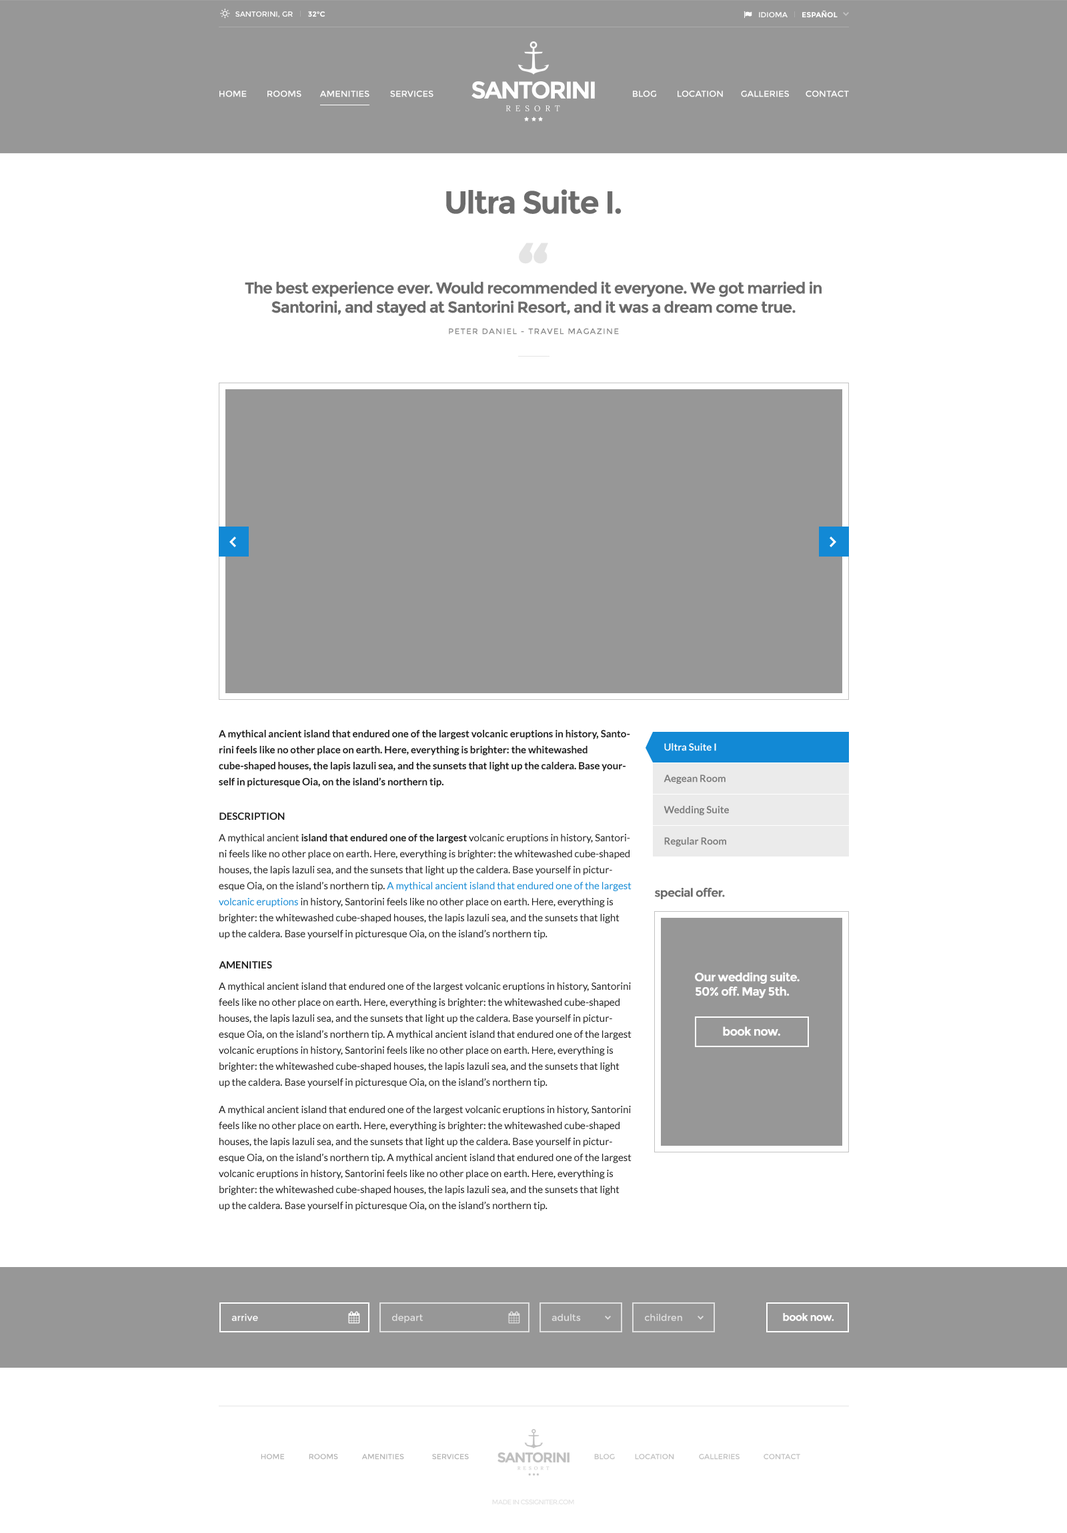
<style>
.page{position:relative;width:1067px;height:1533px;background:#ffffff}
.page>*{position:absolute;margin:0}
.t1{font:7.3px "Montserrat-Regular";color:#fefefe}
.t2{font:7.3px "Montserrat-Bold";color:#fefefe}
.t3{font:7.3px "Montserrat-Bold";color:#fefefe;text-transform:uppercase}
.t4{font:7.3px "Montserrat-Regular";color:#fefefe;text-transform:uppercase}
.t5{font:24px "Montserrat-Bold";letter-spacing:-0.07em;color:#fefefe}
.t6{font:8.7px "Montserrat-Regular";color:#fefefe}
.t7{font:8px "Lora";letter-spacing:0.58em;color:#fefefe}
.t8{font:32px "Montserrat-Bold";letter-spacing:-0.05em;color:#6c6c6c}
.t9{font:80px "Montserrat-Bold";letter-spacing:-0.05em;color:#e4e4e4}
.t10{font:16px "Montserrat-Bold";letter-spacing:-0.05em;color:#6c6c6c}
.t11{font:8px "Montserrat-Regular";letter-spacing:0.1em;color:#8a8a8a}
.t12{font:10px/16px "Lato-Bold";color:#1e1e1e}
.t13{font:10px "Lato-Bold";color:#ffffff}
.t14{font:10px "Lato-Bold";color:#7b7b7b}
.t15{font:10px "Lato-Bold";color:#1e1e1e}
.t16{font:10px/16px "Lato-Regular";color:#1e1e1e}
.t17{font:10px/16px "Lato-Regular";color:#1289d5}
.t18{font:12px "Montserrat-Bold";letter-spacing:-0.05em;color:#6c6c6c}
.t19{font:12px "Montserrat-Bold";letter-spacing:-0.05em;color:#ffffff}
.t20{font:10.7px "Montserrat-Bold";letter-spacing:-0.05em;color:#ffffff}
.t21{font:9.3px "Montserrat-Regular";color:#ffffff}
.t22{font:9.3px "Montserrat-Regular";color:#e0e0e0}
.t23{font:7.3px "Montserrat-Regular";color:#b4b4b4}
.t24{font:7.3px "Montserrat-Regular";color:#bfbfbf}
.t25{font:6.7px "Montserrat-Regular";letter-spacing:-0.07em;color:#e3e3e3}
</style>
<div class="page">
<p class="t1" style="left:235px;top:11px;width:58px;height:7px">SANTORINI, GR</p>
<p class="t2" style="left:308px;top:11px;width:17px;height:6px">32°C</p>
<p class="t3" style="left:759px;top:10px;width:78px;height:7px"><span class="t4">idioma       </span>Español</p>
<p class="t5" style="left:471px;top:81px;width:124px;height:18px">SANTORINI</p>
<p class="t6" style="left:219px;top:91px;width:28px;height:6px">HOME</p>
<p class="t6" style="left:267px;top:91px;width:34px;height:6px">ROOMS</p>
<p class="t6" style="left:319px;top:91px;width:50px;height:6px">AMENITIES</p>
<p class="t6" style="left:390px;top:91px;width:43px;height:6px">SERVICES</p>
<p class="t6" style="left:633px;top:91px;width:23px;height:6px">BLOG</p>
<p class="t6" style="left:677px;top:91px;width:46px;height:6px">LOCATION</p>
<p class="t6" style="left:741px;top:91px;width:48px;height:6px">GALLERIES</p>
<p class="t6" style="left:805px;top:91px;width:44px;height:6px">CONTACT</p>
<p class="t7" style="left:506px;top:105px;width:54px;height:6px">RESORT</p>
<p class="t8" style="left:446px;top:189px;width:175px;height:25px">Ultra Suite I.</p>
<p class="t9" style="left:519px;top:243px;width:29px;height:21px">“</p>
<p class="t10" style="left:245px;top:281px;width:576px;height:36px;text-align:center">The best experience ever. Would recommended it everyone. We got married in<br>Santorini, and stayed at Santorini Resort, and it was a dream come true.</p>
<p class="t11" style="left:449px;top:328px;width:170px;height:7px">PETER DANIEL - TRAVEL MAGAZINE</p>
<p class="t12" style="left:219px;top:730px;width:411px;height:57px">A mythical ancient island that endured one of the largest volcanic eruptions in history, Santorini feels like no other place on earth. Here, everything is brighter: the whitewashed cube-shaped houses, the lapis lazuli sea, and the sunsets that light up the caldera. Base yourself in picturesque Oia, on the island’s northern tip.</p>
<p class="t13" style="left:664px;top:743px;width:52px;height:8px">Ultra Suite I</p>
<p class="t14" style="left:663px;top:775px;width:62px;height:9px">Aegean Room</p>
<p class="t14" style="left:663px;top:806px;width:66px;height:9px">Wedding Suite</p>
<p class="t15" style="left:219px;top:813px;width:66px;height:7px">DESCRIPTION</p>
<p class="t16" style="left:219px;top:834px;width:412px;height:105px">A mythical ancient <span class="t12">island that endured one of the largest</span> volcanic eruptions in history, Santorini feels like no other place on earth. Here, everything is brighter: the whitewashed cube-shaped houses, the lapis lazuli sea, and the sunsets that light up the caldera. Base yourself in picturesque Oia, on the island’s northern tip. <span class="t17">A mythical ancient island that endured one of the largest volcanic eruptions</span> in history, Santorini feels like no other place on earth. Here, everything is brighter: the whitewashed cube-shaped houses, the lapis lazuli sea, and the sunsets that light up the caldera. Base yourself in picturesque Oia, on the island’s northern tip.</p>
<p class="t14" style="left:664px;top:837px;width:62px;height:10px">Regular Room</p>
<p class="t18" style="left:654px;top:887px;width:71px;height:12px">special offer.</p>
<p class="t15" style="left:219px;top:961px;width:53px;height:8px">AMENITIES</p>
<p class="t19" style="left:695px;top:972px;width:104px;height:27px">Our wedding suite.<br>50% off. May 5th.</p>
<p class="t16" style="left:219px;top:983px;width:412px;height:105px">A mythical ancient island that endured one of the largest volcanic eruptions in history, Santorini feels like no other place on earth. Here, everything is brighter: the whitewashed cube-shaped houses, the lapis lazuli sea, and the sunsets that light up the caldera. Base yourself in picturesque Oia, on the island’s northern tip. A mythical ancient island that endured one of the largest volcanic eruptions in history, Santorini feels like no other place on earth. Here, everything is brighter: the whitewashed cube-shaped houses, the lapis lazuli sea, and the sunsets that light up the caldera. Base yourself in picturesque Oia, on the island’s northern tip.</p>
<p class="t19" style="left:723px;top:1027px;width:57px;height:9px">book now.</p>
<p class="t16" style="left:219px;top:1106px;width:412px;height:105px">A mythical ancient island that endured one of the largest volcanic eruptions in history, Santorini feels like no other place on earth. Here, everything is brighter: the whitewashed cube-shaped houses, the lapis lazuli sea, and the sunsets that light up the caldera. Base yourself in picturesque Oia, on the island’s northern tip. A mythical ancient island that endured one of the largest volcanic eruptions in history, Santorini feels like no other place on earth. Here, everything is brighter: the whitewashed cube-shaped houses, the lapis lazuli sea, and the sunsets that light up the caldera. Base yourself in picturesque Oia, on the island’s northern tip.</p>
<p class="t20" style="left:783px;top:1313px;width:51px;height:8px">book now.</p>
<p class="t21" style="left:231px;top:1314px;width:27px;height:7px">arrive</p>
<p class="t22" style="left:392px;top:1314px;width:31px;height:9px">depart</p>
<p class="t22" style="left:551px;top:1314px;width:30px;height:7px">adults</p>
<p class="t22" style="left:645px;top:1314px;width:37px;height:7px">children</p>
<p class="t23" style="left:261px;top:1454px;width:23px;height:6px">HOME</p>
<p class="t23" style="left:309px;top:1454px;width:29px;height:6px">ROOMS</p>
<p class="t23" style="left:361px;top:1454px;width:43px;height:6px">AMENITIES</p>
<p class="t23" style="left:432px;top:1454px;width:37px;height:6px">SERVICES</p>
<p class="t24" style="left:594px;top:1454px;width:21px;height:6px">BLOG</p>
<p class="t24" style="left:635px;top:1454px;width:39px;height:6px">LOCATION</p>
<p class="t24" style="left:699px;top:1454px;width:40px;height:6px">GALLERIES</p>
<p class="t24" style="left:763px;top:1454px;width:37px;height:6px">CONTACT</p>
<p class="t25" style="left:492px;top:1499px;width:82px;height:6px">MADE IN CSSIGNITER.COM</p>
</div>
